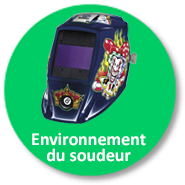
<style>
.page{position:relative;width:185px;height:185px;background:#00cc66}
.page>*{position:absolute;margin:0}
.t1{font:18px/16px "Calibri-Bold";color:#ffffff}
</style>
<div class="page">
<p class="t1" style="left:32px;top:133px;width:114px;height:29px;text-align:center">Environnement<br>du soudeur</p>
</div>
